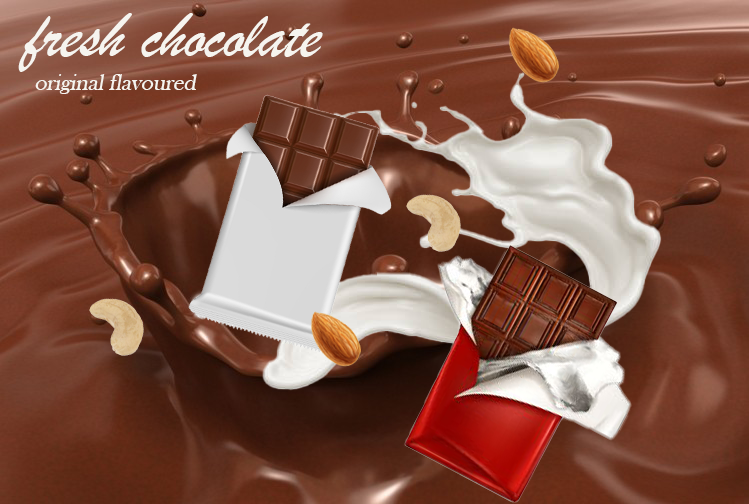
<style>
.page{position:relative;width:749px;height:504px}
.page>*{position:absolute;margin:0}
.t1{font:66.8px "BrushScriptMT";letter-spacing:-0.01em;color:#f6f4ef;font-style:italic}
.t2{font:24px "BaskOldFace";letter-spacing:-0.01em;color:#f6f4ef;font-style:italic}
</style>
<div class="page">
<p class="t1" style="left:18px;top:13px;width:305px;height:59px">fresh chocolate</p>
<p class="t2" style="left:35px;top:74px;width:162px;height:20px">original flavoured</p>
</div>
